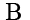
<style>
.page{position:relative;width:30px;height:20px;background:#ffffff}
.page>*{position:absolute;margin:0}
.t1{font:25px "TimesNewRomanPSMT";color:#000000}
</style>
<div class="page">
<p class="t1" style="left:5px;top:3px;width:16px;height:17px">B</p>
</div>
